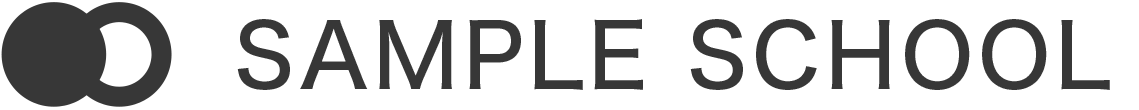
<style>
.page{position:relative;width:1139px;height:110px;background:#ffffff}
.page>*{position:absolute;margin:0}
.t1{font:88.5px "HiraginoSans-W5";letter-spacing:0.05em;color:#373737}
</style>
<div class="page">
<p class="t1" style="left:237px;top:19px;width:873px;height:71px">SAMPLE SCHOOL</p>
</div>
